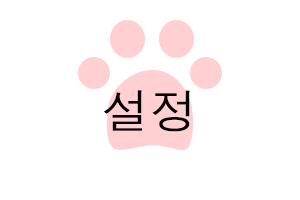
<style>
.page{position:relative;width:300px;height:200px;background:#ffffff}
.page>*{position:absolute;margin:0}
.t1{font:48px "Haansoft-Dotum";color:#000000}
</style>
<div class="page">
<p class="t1" style="left:103px;top:90px;width:87px;height:42px">설정</p>
</div>
